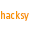
<style>
.page{position:relative;width:30px;height:30px;background:#ffffff}
.page>*{position:absolute;margin:0}
.t1{font:11px "RopaSans-Regular";color:#f89406}
</style>
<div class="page">
<p class="t1" style="left:1px;top:11px;width:28px;height:10px">hacksy</p>
</div>
